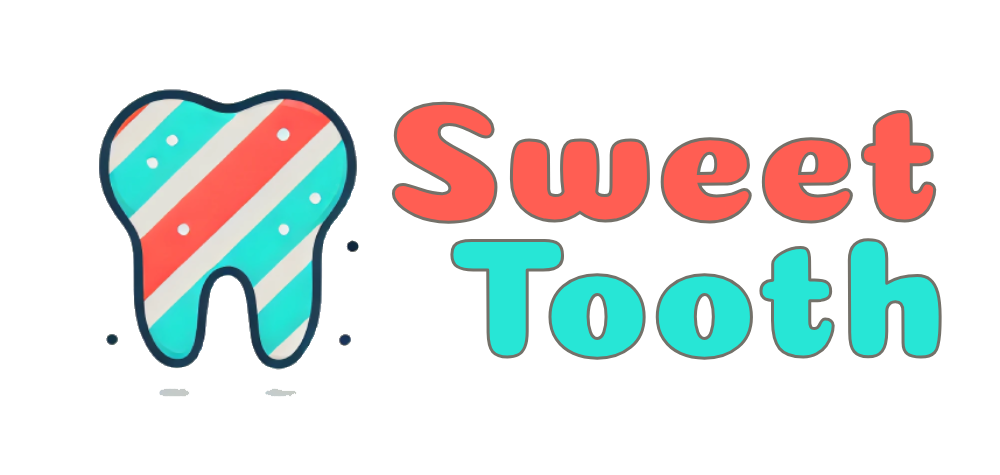
<style>
.page{position:relative;width:1000px;height:475px;background:#ffffff}
.page>*{position:absolute;margin:0}
.t1{font:170px "Coiny-Regular";color:#ff5e53}
.t2{font:170px "Coiny-Regular";color:#27e6d6}
</style>
<div class="page">
<p class="t1" style="left:391px;top:101px;width:546px;height:123px">Sweet</p>
<p class="t2" style="left:449px;top:237px;width:494px;height:124px">Tooth</p>
</div>
